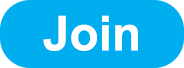
<style>
.page{position:relative;width:184px;height:68px;background:#00aeef}
.page>*{position:absolute;margin:0}
.t1{font:48px "Arial-BoldMT";color:#ffffff}
</style>
<div class="page">
<p class="t1" style="left:43px;top:15px;width:95px;height:36px">Join</p>
</div>
